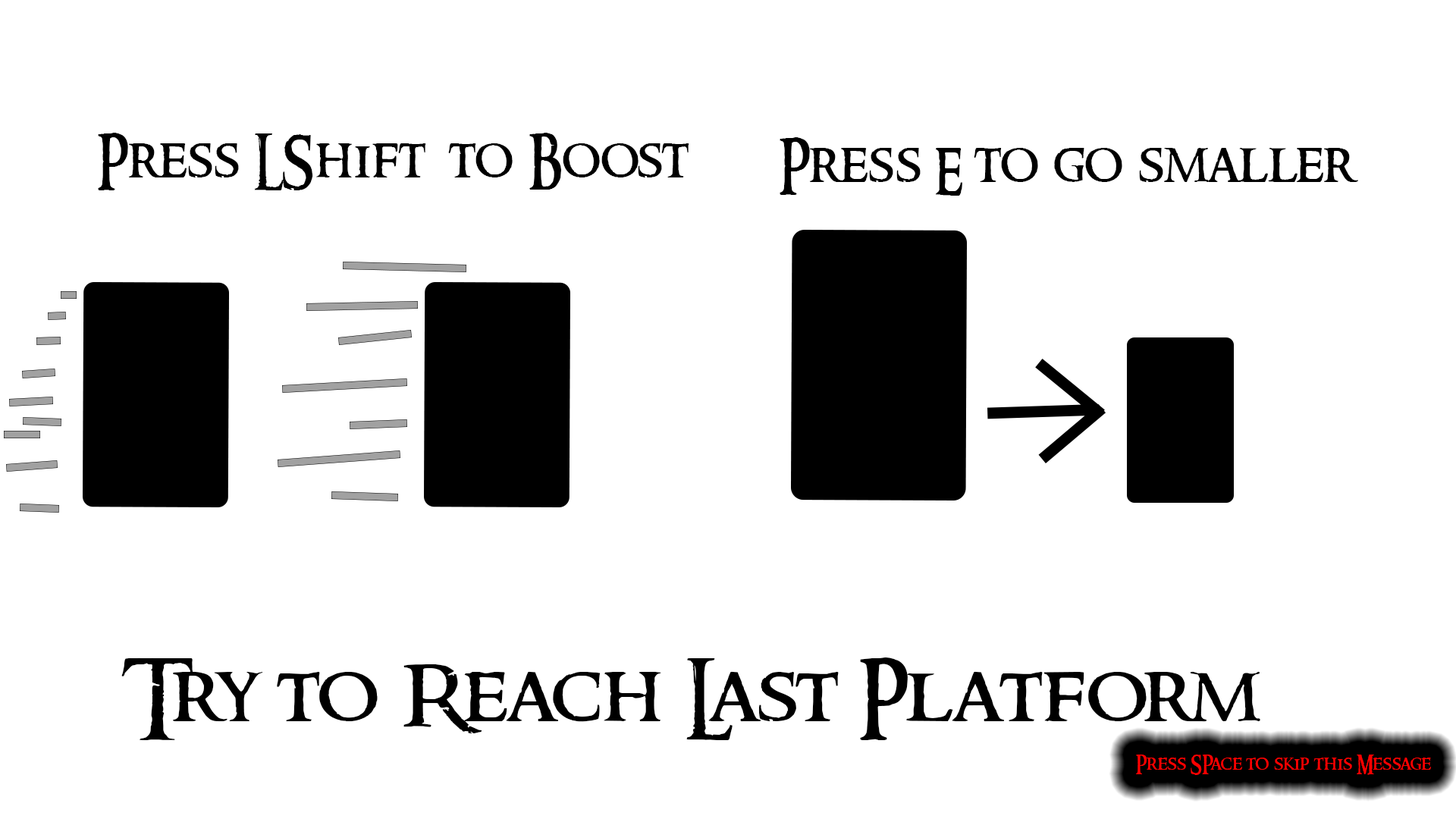
<style>
.page{position:relative;width:1456px;height:819px;background:#ffffff}
.page>*{position:absolute;margin:0}
.t1{font:54.5px "RingbearerMedium";color:#000000}
.t2{font:54.6px "RingbearerMedium";color:#000000}
.t3{font:77.8px "RingbearerMedium";color:#000000;scale:1.12 1}
.t4{font:19.3px "RingbearerMedium";color:#ff0000}
</style>
<div class="page">
<p class="t1" style="left:98px;top:133px;width:591px;height:57px">Press LShift  to Boost</p>
<p class="t2" style="left:780px;top:137px;width:578px;height:59px">Press E to go smaller</p>
<p class="t3" style="left:121px;top:657px;width:1139px;height:83px">Try to Reach Last Platform</p>
<p class="t4" style="left:1136px;top:755px;width:295px;height:20px">Press SPace to skip this Message</p>
</div>
